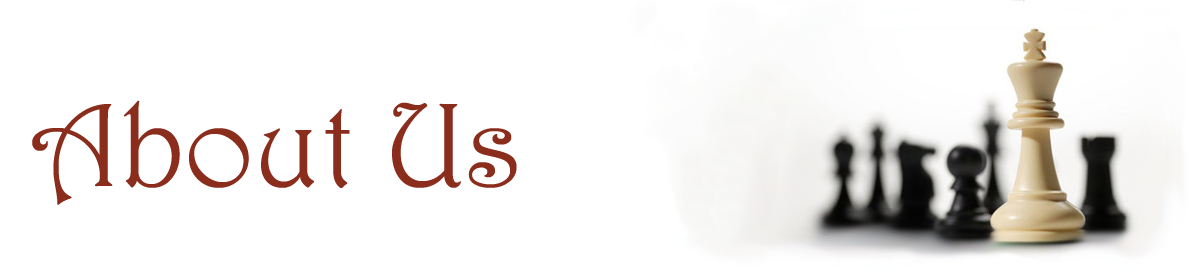
<style>
.page{position:relative;width:1200px;height:280px;background:#ffffff}
.page>*{position:absolute;margin:0}
.t1{font:120px "Harrington";color:#8b2d1c}
</style>
<div class="page">
<p class="t1" style="left:32px;top:100px;width:485px;height:105px">About Us</p>
</div>
